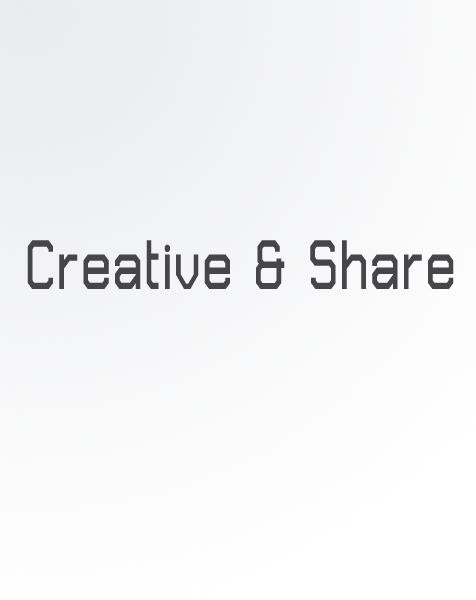
<style>
.page{position:relative;width:476px;height:600px}
.page>*{position:absolute;margin:0}
.t1{font:112.6px "THChakraPetch-Bold";color:#464648;scale:0.73 1}
</style>
<div class="page">
<p class="t1" style="left:27px;top:240px;width:427px;height:49px">Creative &amp; Share</p>
</div>
